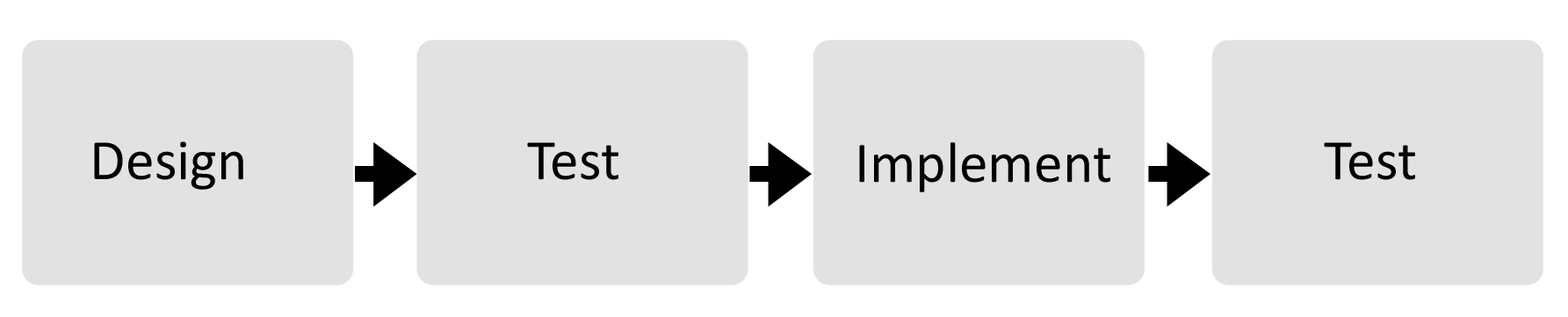
<style>
.page{position:relative;width:1568px;height:317px;background:#e2e2e2}
.page>*{position:absolute;margin:0}
.t1{font:57.8px "Calibri";color:#000000}
</style>
<div class="page">
<p class="t1" style="left:94px;top:141px;width:149px;height:49px">Design</p>
<p class="t1" style="left:527px;top:142px;width:91px;height:38px">Test</p>
<p class="t1" style="left:859px;top:142px;width:251px;height:50px">Implement</p>
<p class="t1" style="left:1324px;top:142px;width:91px;height:38px">Test</p>
</div>
